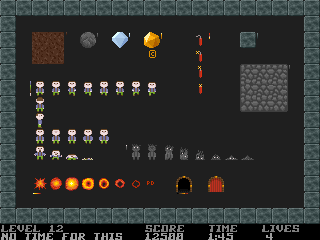
<style>
.page{position:relative;width:320px;height:240px;background:#1f1f1f}
.page>*{position:absolute;margin:0}
.t1{font:7px/8px "Mutant-Camels";color:#9f9f9f}
.t2{font:7px/8px "Mutant-Camels";color:#7f7f7f}
</style>
<div class="page">
<p class="t1" style="left:1px;top:225px;width:298px;height:15px"><span class="t2">LEVEL 12   SCORE   TIME   LIVES<br></span>No time for this 12500   1:45    4</p>
</div>
